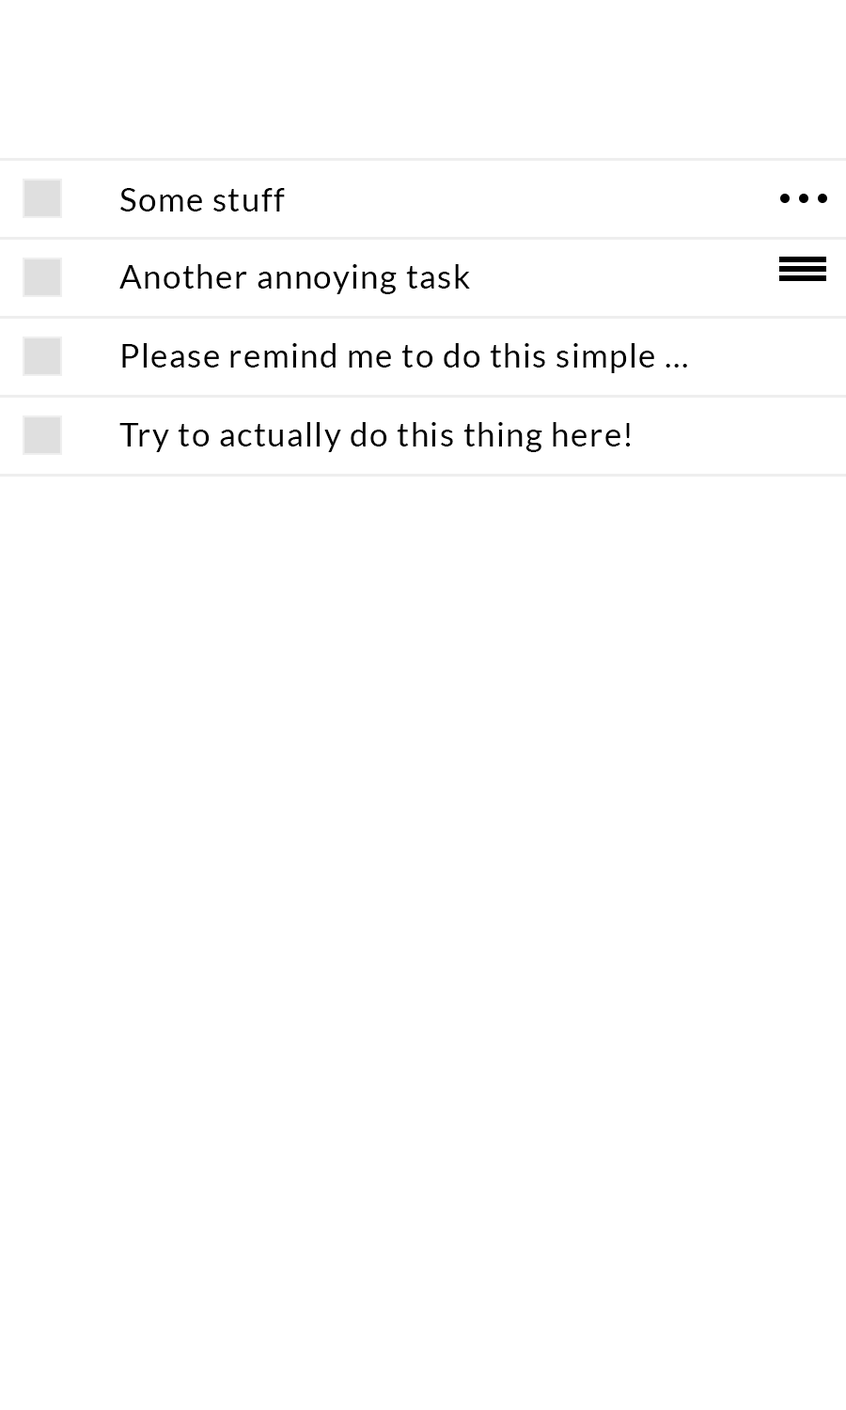
<style>
.page{position:relative;width:846px;height:1410px;background:#ffffff}
.page>*{position:absolute;margin:0}
.t1{font:32.9px "Lato-Regular";letter-spacing:0.04em;color:#000000}
</style>
<div class="page">
<p class="t1" style="left:120px;top:188px;width:165px;height:23px">Some stuff</p>
<p class="t1" style="left:119px;top:264px;width:351px;height:30px">Another annoying task</p>
<p class="t1" style="left:122px;top:343px;width:565px;height:30px">Please remind me to do this simple ...</p>
<p class="t1" style="left:119px;top:422px;width:512px;height:30px">Try to actually do this thing here!</p>
</div>
